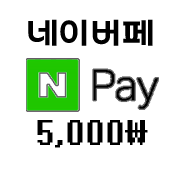
<style>
.page{position:relative;width:180px;height:180px;background:#ffffff}
.page>*{position:absolute;margin:0}
.t1{font:40px "ThecircleB";color:#000000}
.t2{font:40px "System";color:#000000}
</style>
<div class="page">
<p class="t1" style="left:28px;top:19px;width:125px;height:27px">네이버페</p>
<p class="t2" style="left:37px;top:120px;width:111px;height:28px">5,000\</p>
</div>
